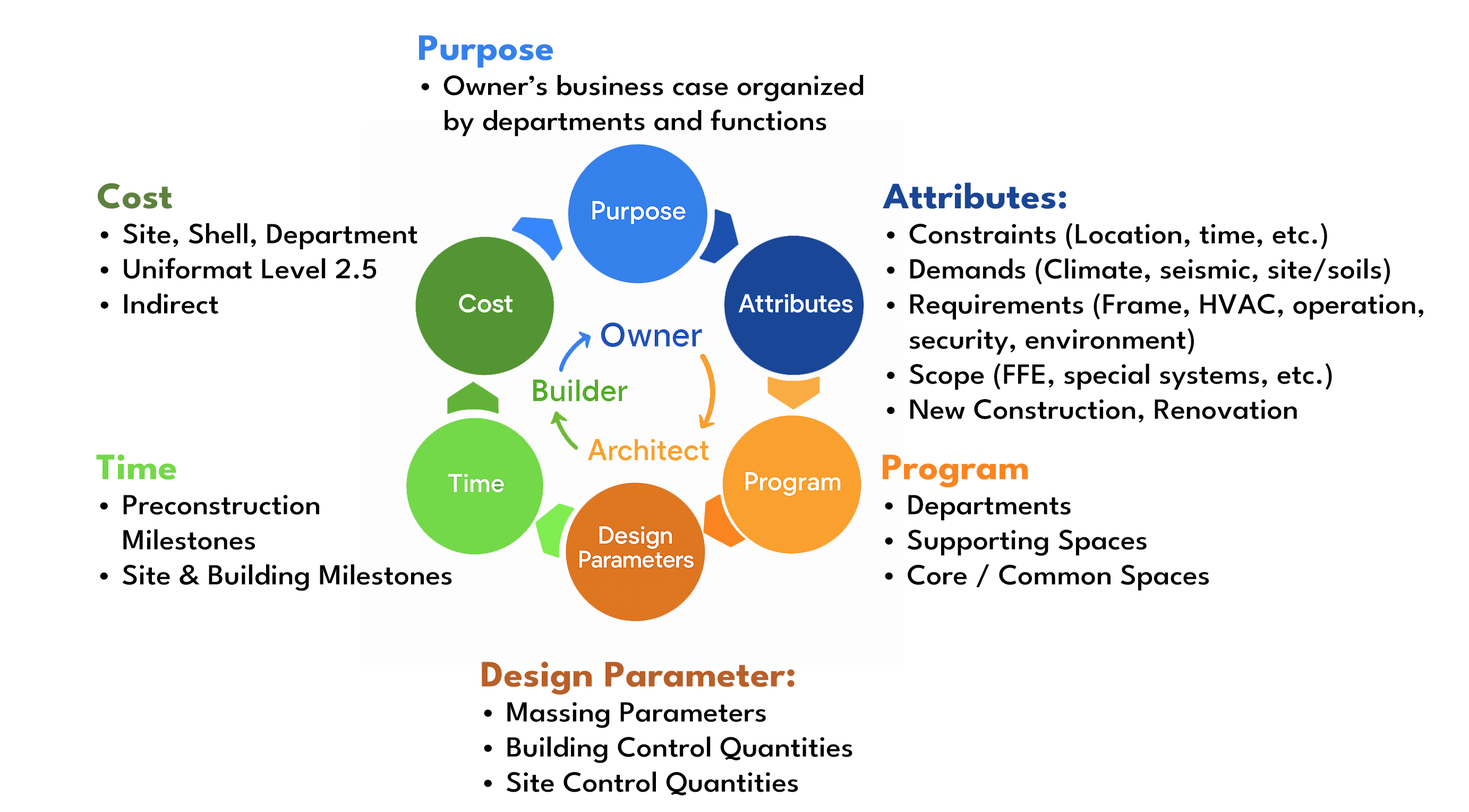
<style>
.page{position:relative;width:1469px;height:812px;background:#ffffff}
.page>*{position:absolute;margin:0}
.t1{font:29.2px "LeagueSpartan-Medium";color:#000000;scale:1.05 1}
.t2{font:37.2px "LeagueSpartan-Bold";color:#3581eb;scale:1.05 1}
.t3{font:37.2px "LeagueSpartan-Bold";color:#5e813f;scale:1.05 1}
.t4{font:37.2px "LeagueSpartan-Bold";color:#194697;scale:1.05 1}
.t5{font:37.2px "LeagueSpartan-Bold";color:#73d948;scale:1.05 1}
.t6{font:37.2px "LeagueSpartan-Bold";color:#fa8520;scale:1.05 1}
.t7{font:37.2px "LeagueSpartan-Bold";color:#b86029;scale:1.05 1}
</style>
<div class="page">
<p class="t1" style="left:419px;top:35px;width:445px;height:102px"><span class="t2">Purpose<br></span>Owner’s business case organized<br>by departments and functions</p>
<p class="t1" style="left:98px;top:183px;width:320px;height:131px"><span class="t3">Cost<br></span>Site, Shell, Department<br>Uniformat Level 2.5<br>Indirect</p>
<p class="t1" style="left:883px;top:182px;width:541px;height:241px"><span class="t4">Attributes:<br></span>Constraints (Location, time, etc.)<br>Demands (Climate, seismic, site/soils)<br>Requirements (Frame, HVAC, operation, <br>security, environment)<br>Scope (FFE, special systems, etc.)<br>New Construction, Renovation</p>
<p class="t1" style="left:96px;top:454px;width:356px;height:137px"><span class="t5">Time<br></span>Preconstruction <br>Milestones<br>Site &amp; Building Milestones</p>
<p class="t1" style="left:883px;top:454px;width:326px;height:137px"><span class="t6">Program<br></span>Departments<br>Supporting Spaces<br>Core / Common Spaces</p>
<p class="t1" style="left:482px;top:661px;width:371px;height:134px"><span class="t7">Design Parameter:<br></span>Massing Parameters<br>Building Control Quantities<br>Site Control Quantities</p>
</div>
